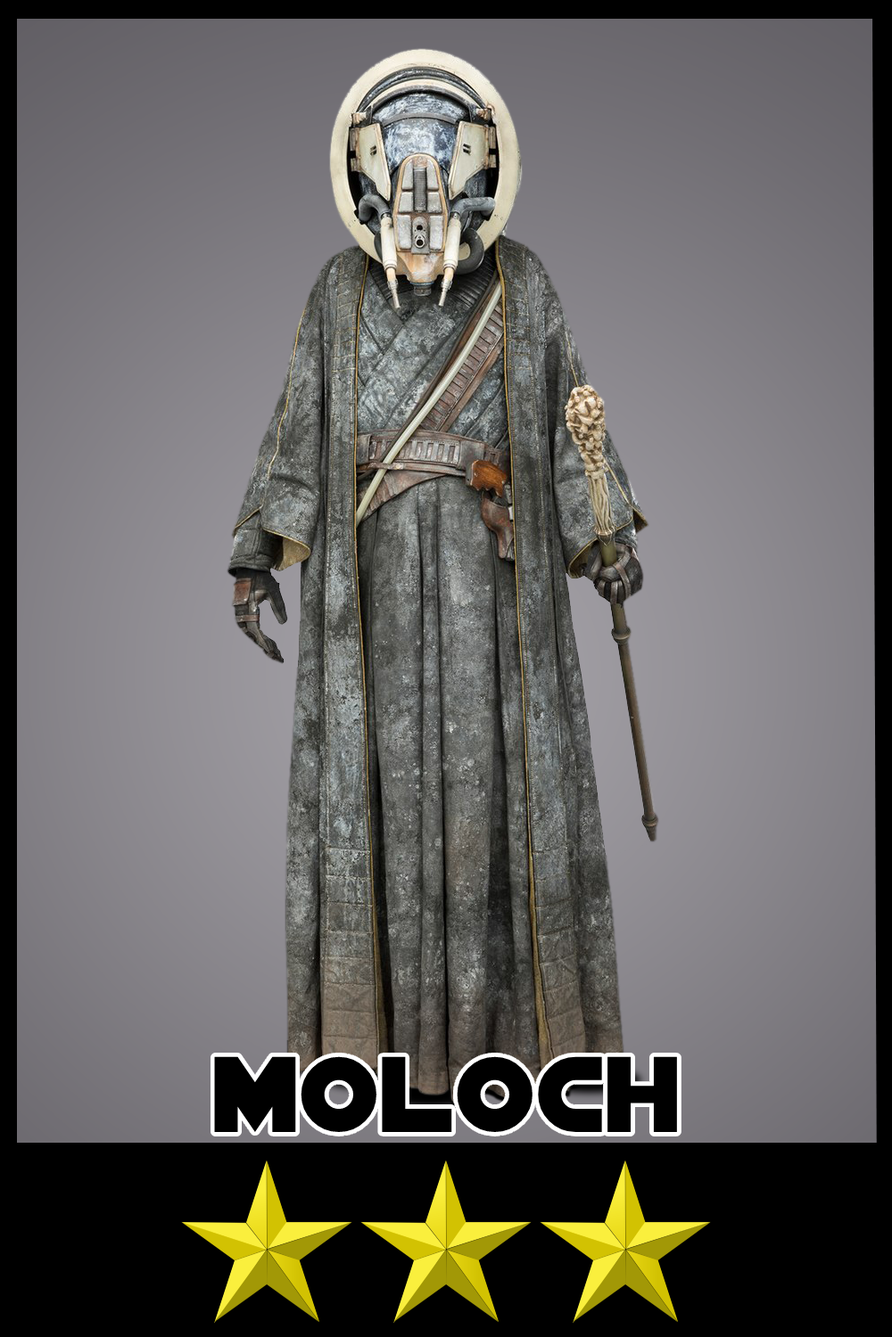
<style>
.page{position:relative;width:892px;height:1337px}
.page>*{position:absolute;margin:0}
.t1{font:115.5px "DistantGalaxy";color:#000000}
</style>
<div class="page">
<p class="t1" style="left:214px;top:1057px;width:463px;height:75px">moloch</p>
</div>
